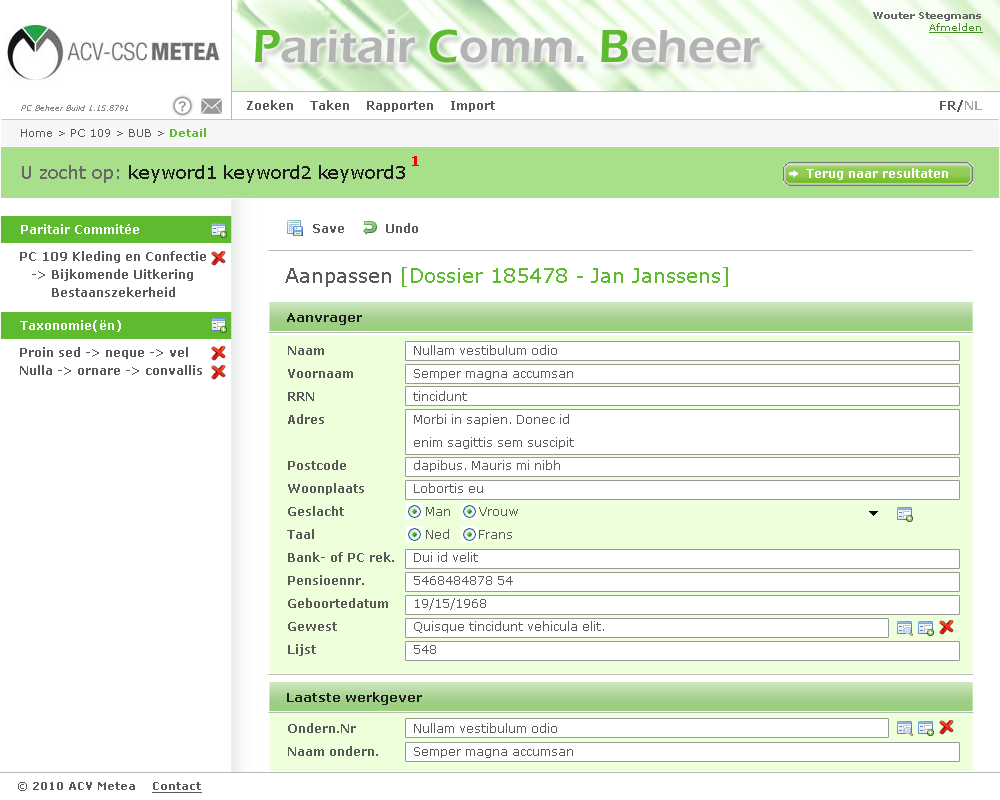
<style>
.page{position:relative;width:1000px;height:800px;background:#ffffff}
.page>*{position:absolute;margin:0}
.t1{font:10px "Verdana-Bold";color:#666666}
.t2{font:10px "Verdana";color:#488f24;text-decoration:underline}
.t3{font:48px "ErasITC-Demi";color:#b3b3b3}
.t4{font:48px "ErasITC-Demi";color:#5eba2f}
.t5{font:12px "Verdana-Bold";color:#595959}
.t6{font:12px "Verdana-Bold";color:#a4a4a4}
.t7{font:8px "Verdana-Italic";color:#8c8c8c}
.t8{font:11px "Verdana";color:#595959}
.t9{font:11px "Verdana-Bold";color:#5eba2f}
.t10{font:14px "Verdana-Bold";color:#ff0000;font-weight:bold}
.t11{font:18px "Verdana";color:#1c1c1c}
.t12{font:18px "Verdana";color:#686868}
.t13{font:12px "Verdana-Bold";color:#ffffff}
.t14{font:12px/18px "Verdana-Bold";color:#595959}
.t15{font:20px "Verdana";color:#5eba2f}
.t16{font:20px "Verdana";color:#595959}
.t17{font:13px "Verdana-Bold";color:#1e1e1e}
.t18{font:12px/23px "Verdana-Bold";color:#595959}
.t19{font:12px/23px "Verdana";color:#595959}
.t20{font:11px "Verdana-Bold";color:#595959}
.t21{font:11px "Verdana-Bold";color:#595959;text-decoration:underline}
</style>
<div class="page">
<p class="t1" style="left:873px;top:12px;width:110px;height:21px;text-align:right">Wouter Steegmans<br><span class="t2">Afmelden</span></p>
<p class="t3" style="left:255px;top:29px;width:505px;height:34px"><span class="t4">P</span>aritair <span class="t4">C</span>omm. <span class="t4">B</span>eheer</p>
<p class="t5" style="left:247px;top:100px;width:248px;height:12px">Zoeken    Taken    Rapporten    Import</p>
<p class="t5" style="left:940px;top:100px;width:42px;height:12px">FR/<span class="t6">NL</span></p>
<p class="t7" style="left:21px;top:105px;width:107px;height:6px">PC Beheer Build 1.15.8791</p>
<p class="t8" style="left:21px;top:128px;width:185px;height:9px">Home &gt; PC 109 &gt; BUB &gt; <span class="t9">Detail</span></p>
<p class="t10" style="left:412px;top:156px;width:7px;height:10px">1</p>
<p class="t11" style="left:22px;top:165px;width:383px;height:18px"><span class="t12">U zocht op: </span>keyword1 keyword2 keyword3</p>
<p class="t13" style="left:806px;top:168px;width:142px;height:12px">Terug naar resultaten</p>
<p class="t13" style="left:21px;top:224px;width:118px;height:10px">Paritair Commitée</p>
<p class="t5" style="left:313px;top:223px;width:105px;height:10px">Save          Undo</p>
<p class="t14" style="left:20px;top:251px;width:186px;height:46px">PC 109 Kleding en Confectie<br>   -&gt; Bijkomende Uitkering <br>        Bestaanszekerheid</p>
<p class="t15" style="left:285px;top:267px;width:443px;height:20px"><span class="t16">Aanpassen</span> [Dossier 185478 - Jan Janssens]</p>
<p class="t17" style="left:287px;top:313px;width:75px;height:12px">Aanvrager</p>
<p class="t13" style="left:20px;top:320px;width:101px;height:12px">Taxonomie(ën)</p>
<p class="t14" style="left:20px;top:347px;width:182px;height:28px">Proin sed -&gt; neque -&gt; vel <br>Nulla -&gt; ornare -&gt; convallis</p>
<p class="t18" style="left:287px;top:346px;width:107px;height:310px">Naam<br>Voornaam<br>RRN<br>Adres<br><br>Postcode<br>Woonplaats<br>Geslacht<br>Taal<br>Bank- of PC rek.<br>Pensioennr.<br>Geboortedatum<br>Gewest<br>Lijst</p>
<p class="t19" style="left:413px;top:345px;width:191px;height:309px">Nullam vestibulum odio <br>Semper magna accumsan <br>tincidunt<br>Morbi in sapien. Donec id <br>enim sagittis sem suscipit <br>dapibus. Mauris mi nibh<br>Lobortis eu<br>   Man       Vrouw<br>   Ned       Frans<br>Dui id velit<br>5468484878 54<br>19/15/1968<br>Quisque tincidunt vehicula elit. <br>548</p>
<p class="t17" style="left:287px;top:692px;width:135px;height:13px">Laatste werkgever</p>
<p class="t18" style="left:288px;top:723px;width:90px;height:33px">Ondern.Nr<br>Naam ondern.</p>
<p class="t19" style="left:414px;top:723px;width:159px;height:35px">Nullam vestibulum odio <br>Semper magna accumsan</p>
<p class="t20" style="left:18px;top:782px;width:184px;height:11px"><span class="t8">©</span> 2010 ACV Metea    <span class="t21">Contact</span></p>
</div>
